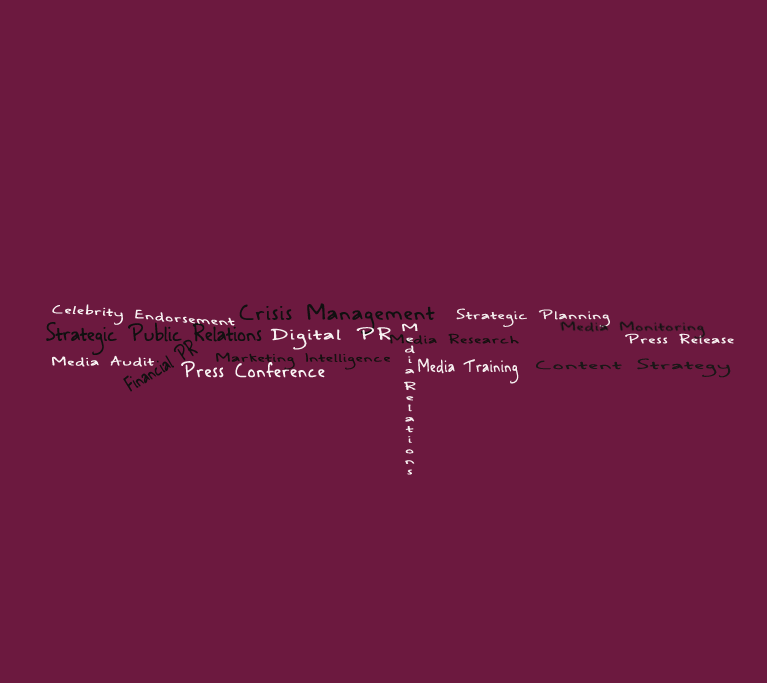
<style>
.page{position:relative;width:767px;height:683px;background:#6c193f}
.page>*{position:absolute;margin:0}
.t1{font:11.8px "ASafePlacetoFall";letter-spacing:0.075em;color:#f9f4f4;scale:1.49 1}
.t2{font:21.5px "ASafePlacetoFall";letter-spacing:0.075em;color:#101010;scale:1.05 1}
.t3{font:11.8px "ASafePlacetoFall";letter-spacing:0.075em;color:#f1eaea;scale:1.49 1}
.t4{font:21.7px "ASafePlacetoFall";letter-spacing:0.025em;color:#101010;scale:0.9 1}
.t5{font:15.2px "ASafePlacetoFall";letter-spacing:0.1em;color:#f7f1f1;scale:1.49 1}
.t6{font:9.9px "ASafePlacetoFall";letter-spacing:0.075em;color:#f7f1f1;scale:1.99 1}
.t7{font:21px "ASafePlacetoFall";letter-spacing:0.025em;color:#101010;scale:0.67 1}
.t8{font:11.8px "ASafePlacetoFall";letter-spacing:0.075em;color:#151010;scale:1.49 1}
.t9{font:11.8px "ASafePlacetoFall";letter-spacing:0.075em;color:#f7f1f1;scale:1.49 1}
.t10{font:19.7px "ASafePlacetoFall";letter-spacing:0.075em;color:#f9f4f4;scale:0.9 1}
.t11{font:17.7px "ASafePlacetoFall";letter-spacing:0.075em;color:#f7f1f1;scale:0.77 1}
.t12{font:11.8px "ASafePlacetoFall";letter-spacing:0.075em;color:#1a1717;scale:2.07 1}
</style>
<div class="page">
<p class="t1" style="left:52px;top:304px;width:183px;height:22px">Celebrity Endorsement</p>
<p class="t2" style="left:239px;top:303px;width:196px;height:31px">Crisis Management</p>
<p class="t3" style="left:456px;top:308px;width:154px;height:19px">Strategic Planning</p>
<p class="t4" style="left:46px;top:322px;width:216px;height:33px">Strategic Public Relations</p>
<p class="t5" style="left:270px;top:327px;width:121px;height:23px">Digital PR</p>
<p class="t6" style="left:402px;top:323px;width:16px;height:152px">Media Relations</p>
<p class="t7" style="left:123px;top:339px;width:75px;height:53px;rotate:-30deg">Financial PR</p>
<p class="t8" style="left:390px;top:333px;width:129px;height:12px">Media Research</p>
<p class="t9" style="left:625px;top:333px;width:109px;height:11px">Press Release</p>
<p class="t8" style="left:216px;top:352px;width:174px;height:18px">Marketing Intelligence</p>
<p class="t1" style="left:52px;top:355px;width:102px;height:12px">Media Audit</p>
<p class="t10" style="left:181px;top:361px;width:144px;height:17px">Press Conference</p>
<p class="t11" style="left:418px;top:358px;width:101px;height:26px">Media Training</p>
<p class="t12" style="left:536px;top:358px;width:195px;height:20px">Content Strategy</p>
</div>
